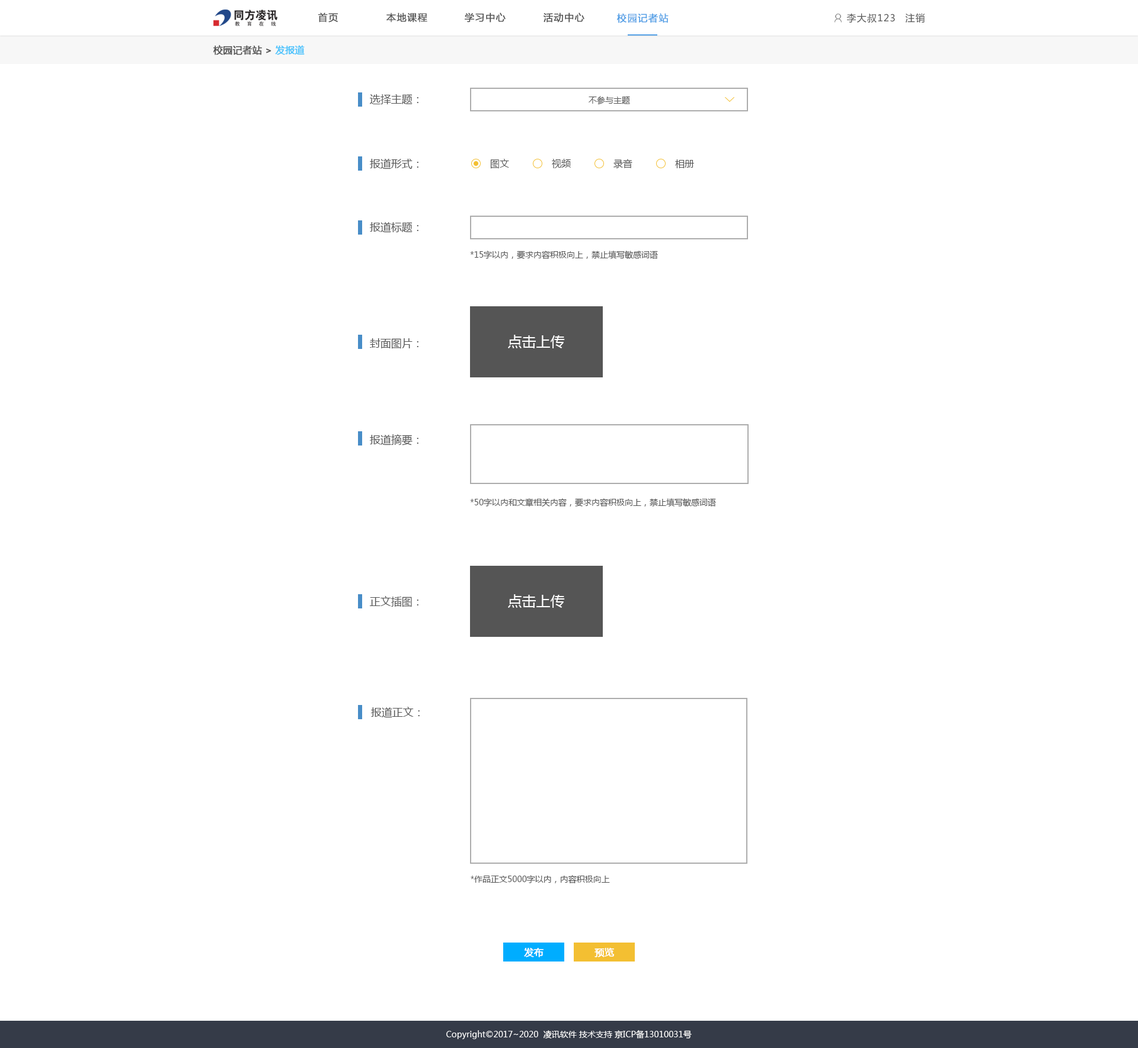
<style>
.page{position:relative;width:1138px;height:1048px;background:#ffffff}
.page>*{position:absolute;margin:0}
.t1{font:9.5px "MicrosoftYaHei";letter-spacing:0.075em;color:#555555;font-weight:bold}
.t2{font:9.5px "MicrosoftYaHei";letter-spacing:0.075em;color:#54a0e6;font-weight:bold}
.t3{font:9.5px "MicrosoftYaHei";letter-spacing:0.075em;color:#555555}
.t4{font:9.5px "MicrosoftYaHei";color:#555555;font-weight:bold}
.t5{font:9.5px "MicrosoftYaHei";color:#4dc4fc;font-weight:bold}
.t6{font:10.7px "MicrosoftYaHei";color:#555555}
.t7{font:8.3px "MicrosoftYaHei";color:#555555}
.t8{font:9.5px "MicrosoftYaHei";color:#555555}
.t9{font:14.2px "MicrosoftYaHei";color:#ffffff}
.t10{font:9.5px "MicrosoftYaHei";color:#ffffff;font-weight:bold}
.t11{font:8.3px "MicrosoftYaHei";color:#ffffff}
</style>
<div class="page">
<p class="t1" style="left:318px;top:12px;width:20px;height:11px">首页</p>
<p class="t1" style="left:386px;top:12px;width:41px;height:11px">本地课程</p>
<p class="t1" style="left:465px;top:12px;width:40px;height:11px">学习中心</p>
<p class="t1" style="left:543px;top:12px;width:41px;height:11px">活动中心</p>
<p class="t2" style="left:617px;top:13px;width:51px;height:10px">校园记者站</p>
<p class="t3" style="left:846px;top:13px;width:49px;height:10px">李大叔123</p>
<p class="t3" style="left:905px;top:13px;width:19px;height:10px">注销</p>
<p class="t4" style="left:213px;top:45px;width:92px;height:10px">校园记者站 &gt; <span class="t5">发报道</span></p>
<p class="t6" style="left:370px;top:94px;width:48px;height:10px">选择主题：</p>
<p class="t7" style="left:588px;top:96px;width:42px;height:9px">不参与主题</p>
<p class="t6" style="left:370px;top:158px;width:48px;height:11px">报道形式：</p>
<p class="t8" style="left:490px;top:159px;width:19px;height:10px">图文</p>
<p class="t8" style="left:552px;top:159px;width:19px;height:9px">视频</p>
<p class="t8" style="left:613px;top:159px;width:19px;height:9px">录音</p>
<p class="t8" style="left:675px;top:159px;width:19px;height:9px">相册</p>
<p class="t6" style="left:370px;top:222px;width:48px;height:11px">报道标题：</p>
<p class="t7" style="left:470px;top:251px;width:188px;height:9px">*15字以内，要求内容积极向上，禁止填写敏感词语</p>
<p class="t6" style="left:370px;top:338px;width:48px;height:11px">封面图片：</p>
<p class="t9" style="left:508px;top:335px;width:57px;height:13px">点击上传</p>
<p class="t6" style="left:370px;top:434px;width:48px;height:12px">报道摘要：</p>
<p class="t7" style="left:470px;top:498px;width:246px;height:9px">*50字以内和文章相关内容，要求内容积极向上，禁止填写敏感词语</p>
<p class="t6" style="left:369px;top:596px;width:49px;height:11px">正文插图：</p>
<p class="t9" style="left:508px;top:594px;width:57px;height:14px">点击上传</p>
<p class="t6" style="left:371px;top:707px;width:49px;height:11px">报道正文：</p>
<p class="t7" style="left:470px;top:875px;width:140px;height:8px">*作品正文5000字以内，内容积极向上</p>
<p class="t10" style="left:524px;top:948px;width:19px;height:10px">发布</p>
<p class="t10" style="left:594px;top:948px;width:20px;height:10px">预览</p>
<p class="t11" style="left:446px;top:1030px;width:245px;height:9px">Copyright©2017~2020  凌讯软件 技术支持 京ICP备13010031号</p>
</div>
